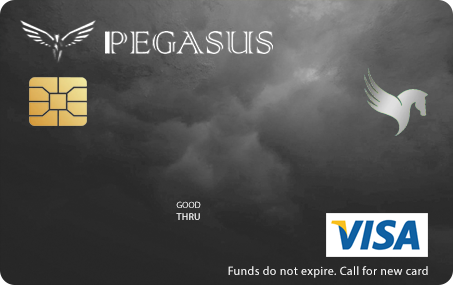
<style>
.page{position:relative;width:453px;height:285px}
.page>*{position:absolute;margin:0}
.t1{font:9px "MyriadPro-Regular"}
.t2{font:10px "MyriadPro-Regular";letter-spacing:0.02em}
.t3{font:12px "MyriadPro-Regular";letter-spacing:0.03em;color:#ffffff}
</style>
<div class="page">
<p class="t1" style="left:176px;top:201px;width:25px;height:19px;text-align:center">GOOD<br><span class="t2">THRU</span></p>
<p class="t3" style="left:228px;top:266px;width:200px;height:12px">Funds do not expire. Call for new card</p>
</div>
